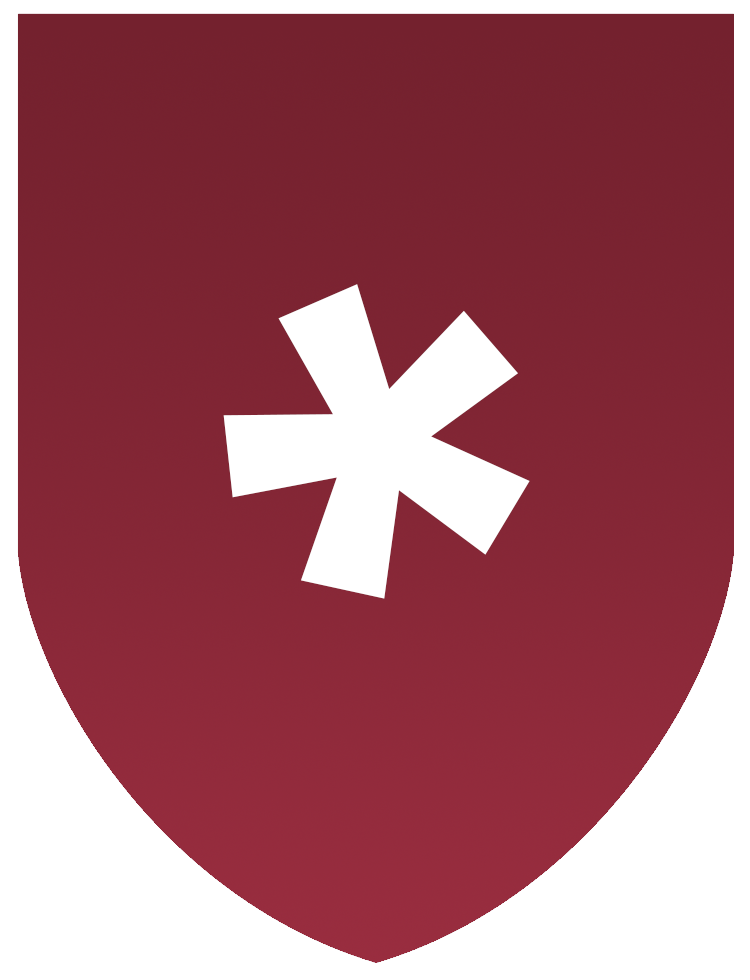
<style>
.page{position:relative;width:750px;height:980px;background:#ffffff}
.page>*{position:absolute;margin:0}
.t1{font:704px "CharcoalCY";color:#ffffff}
</style>
<div class="page">
<p class="t1" style="left:223px;top:284px;width:307px;height:315px;rotate:-23deg">*</p>
</div>
